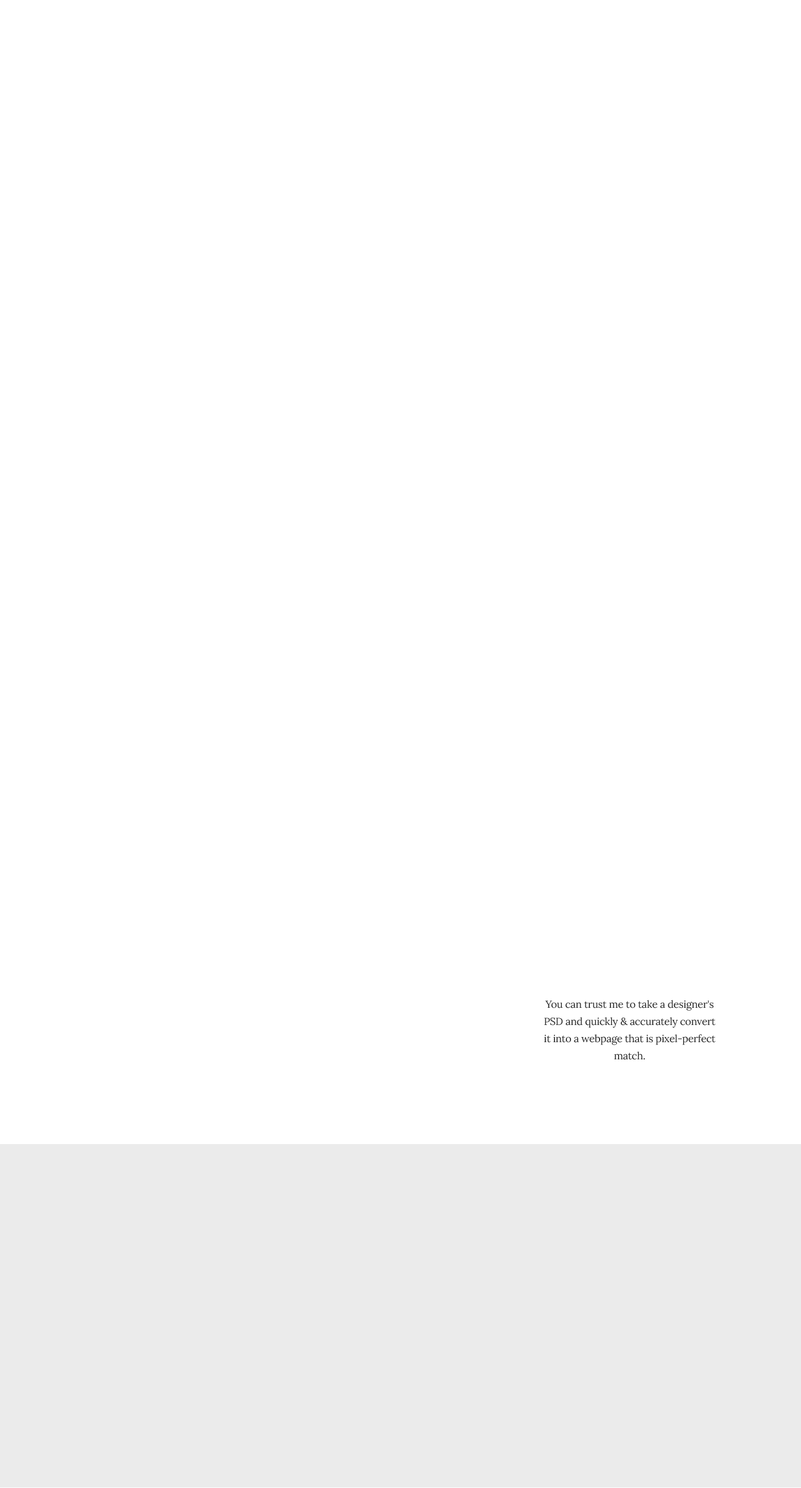
<style>
.page{position:relative;width:801px;height:1488px;background:#ffffff}
.page>*{position:absolute;margin:0}
.t1{font:10.3px/17.2px "Lora-Regular";letter-spacing:-0.02em;color:#2b2b2b}
</style>
<div class="page">
<p class="t1" style="left:544px;top:1000px;width:172px;height:60px;text-align:center">You can trust me to take a designer's PSD and quickly &amp; accurately convert it into a webpage that is pixel-perfect match.</p>
</div>
